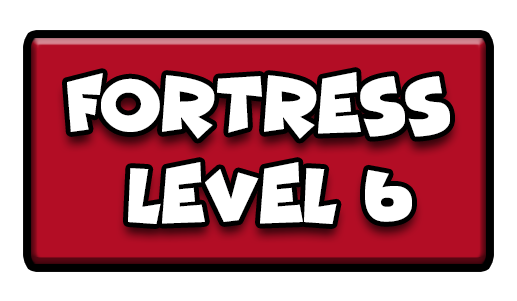
<style>
.page{position:relative;width:517px;height:301px;background:#ffffff}
.page>*{position:absolute;margin:0}
.t1{font:77.7px "Funhouse";color:#ffffff;scale:0.95 1}
</style>
<div class="page">
<p class="t1" style="left:67px;top:72px;width:383px;height:67px">FORTRESS</p>
<p class="t1" style="left:128px;top:162px;width:284px;height:62px">LEVEL 6</p>
</div>
